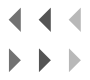
<style>
.page{position:relative;width:90px;height:80px;background:#ffffff}
.page>*{position:absolute;margin:0}
.t1{font:24px "SegoeUISymbol";color:#727272}
.t2{font:24px "SegoeUISymbol";color:#545454}
.t3{font:24px "SegoeUISymbol";color:#b8b8b8}
</style>
<div class="page">
<p class="t1" style="left:8px;top:7px;width:13px;height:25px;rotate:-45deg">◤</p>
<p class="t2" style="left:38px;top:7px;width:13px;height:25px;rotate:-45deg">◤</p>
<p class="t3" style="left:68px;top:7px;width:13px;height:25px;rotate:-45deg">◤</p>
<p class="t1" style="left:8px;top:48px;width:13px;height:24px;rotate:135deg">◤</p>
<p class="t2" style="left:38px;top:48px;width:13px;height:24px;rotate:135deg">◤</p>
<p class="t3" style="left:68px;top:48px;width:13px;height:24px;rotate:135deg">◤</p>
</div>
